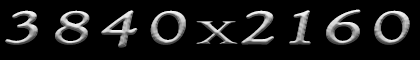
<style>
.page{position:relative;width:420px;height:60px;background:#000000}
.page>*{position:absolute;margin:0}
.t1{font:48px "GoudyOldStyleT-Italic";letter-spacing:0.075em;font-variant:small-caps;font-weight:bold;scale:1.67 1}
.t2{font:36px "RingbearerMedium";letter-spacing:0.075em;scale:1.67 1}
</style>
<div class="page">
<p class="t1" style="left:5px;top:9px;width:405px;height:39px">3840<span class="t2">x</span>2160</p>
<p class="t1" style="left:5px;top:9px;width:405px;height:39px">3840<span class="t2">x</span>2160</p>
</div>
